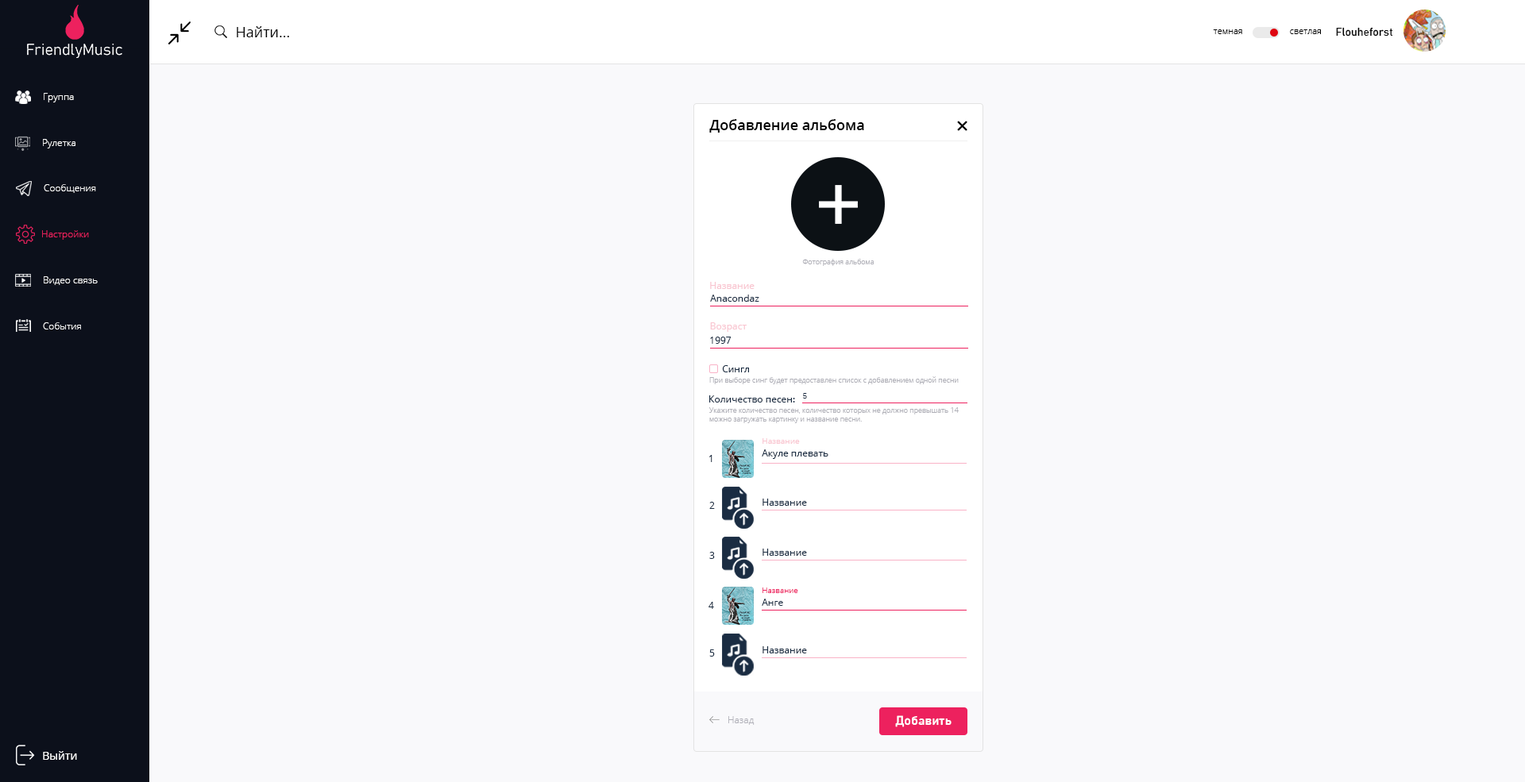
<style>
.page{position:relative;width:1525px;height:782px;background:#f9f9fb}
.page>*{position:absolute;margin:0}
.t1{font:14.3px "OpenSans";color:#000000}
.t2{font:8.7px "OpenSans-Light";color:#000000}
.t3{font:11.1px "Bahnschrift";color:#000000}
.t4{font:9.5px "OpenSans-Light";color:#ffffff}
.t5{font:14.3px "OpenSans-Semibold";color:#000000}
.t6{font:9.5px "OpenSans-Light";color:#ed215e}
.t7{font:7.1px "OpenSans-Light";color:#afafb7}
.t8{font:9.5px "OpenSans";color:#f9c5d0}
.t9{font:9.5px "OpenSans";color:#1a2c42}
.t10{font:7.9px "OpenSans-Light";color:#1a2c42}
.t11{font:7.9px "OpenSans";color:#f9c5d0}
.t12{font:7.9px "OpenSans-Light";color:#ed215e}
.t13{font:9.5px "OpenSans-Light";color:#afafb7}
.t14{font:12.7px "Bahnschrift-SemiBold";color:#ffffff}
.t15{font:11.1px "OpenSans";color:#ffffff}
</style>
<div class="page">
<p class="t1" style="left:237px;top:26px;width:52px;height:11px">Найти...</p>
<p class="t2" style="left:1213px;top:29px;width:29px;height:5px">темная</p>
<p class="t2" style="left:1290px;top:29px;width:31px;height:5px">светлая</p>
<p class="t3" style="left:1336px;top:27px;width:57px;height:10px">Flouheforst</p>
<p class="t4" style="left:44px;top:93px;width:30px;height:9px">Группа</p>
<p class="t5" style="left:709px;top:119px;width:155px;height:14px">Добавление альбома</p>
<p class="t4" style="left:43px;top:139px;width:32px;height:9px">Рулетка</p>
<p class="t4" style="left:44px;top:184px;width:52px;height:9px">Сообщения</p>
<p class="t6" style="left:42px;top:230px;width:47px;height:10px">Настройки</p>
<p class="t7" style="left:802px;top:259px;width:71px;height:7px">Фотография альбома</p>
<p class="t4" style="left:44px;top:276px;width:54px;height:9px">Видео связь</p>
<p class="t8" style="left:710px;top:282px;width:44px;height:7px">Название</p>
<p class="t9" style="left:710px;top:295px;width:49px;height:7px">Anacondaz</p>
<p class="t4" style="left:43px;top:322px;width:38px;height:8px">События</p>
<p class="t8" style="left:710px;top:322px;width:36px;height:10px">Возраст</p>
<p class="t9" style="left:710px;top:337px;width:21px;height:7px">1997</p>
<p class="t9" style="left:722px;top:365px;width:27px;height:7px">Сингл</p>
<p class="t7" style="left:709px;top:376px;width:249px;height:8px">При выборе синг будет предоставлен список с добавлением одной песни</p>
<p class="t9" style="left:709px;top:395px;width:86px;height:8px">Количество песен:</p>
<p class="t10" style="left:803px;top:393px;width:4px;height:6px">5</p>
<p class="t7" style="left:709px;top:407px;width:249px;height:16px">Укажите количество песен, количество которых не должно превышать 14<br>можно загружать картинку и название песни.</p>
<p class="t9" style="left:761px;top:449px;width:67px;height:10px">Акуле плевать</p>
<p class="t11" style="left:762px;top:438px;width:38px;height:6px">Название</p>
<p class="t9" style="left:709px;top:455px;width:3px;height:7px">1</p>
<p class="t9" style="left:709px;top:502px;width:6px;height:7px">2</p>
<p class="t9" style="left:762px;top:499px;width:45px;height:7px">Название</p>
<p class="t9" style="left:709px;top:552px;width:6px;height:7px">3</p>
<p class="t9" style="left:762px;top:549px;width:45px;height:7px">Название</p>
<p class="t12" style="left:762px;top:588px;width:36px;height:5px">Название</p>
<p class="t9" style="left:708px;top:602px;width:6px;height:7px">4</p>
<p class="t9" style="left:761px;top:599px;width:22px;height:7px">Анге</p>
<p class="t9" style="left:709px;top:650px;width:6px;height:7px">5</p>
<p class="t9" style="left:762px;top:646px;width:45px;height:8px">Название</p>
<p class="t13" style="left:728px;top:716px;width:26px;height:9px">Назад</p>
<p class="t14" style="left:895px;top:715px;width:56px;height:12px">Добавить</p>
<p class="t15" style="left:43px;top:751px;width:34px;height:9px">Выйти</p>
</div>
